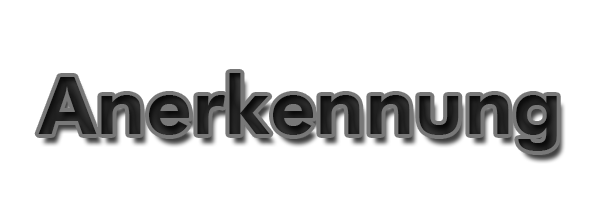
<style>
.page{position:relative;width:600px;height:200px;background:#ffffff}
.page>*{position:absolute;margin:0}
.t1{font:80px "FuturaBT-Heavy";color:#1f1f1f}
</style>
<div class="page">
<p class="t1" style="left:38px;top:73px;width:519px;height:78px">Anerkennung</p>
</div>
